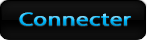
<style>
.page{position:relative;width:147px;height:41px}
.page>*{position:absolute;margin:0}
.t1{font:18.7px "MyriadPro-Regular";font-weight:bold;scale:1.31 1}
</style>
<div class="page">
<p class="t1" style="left:19px;top:12px;width:112px;height:14px">Connecter</p>
</div>
